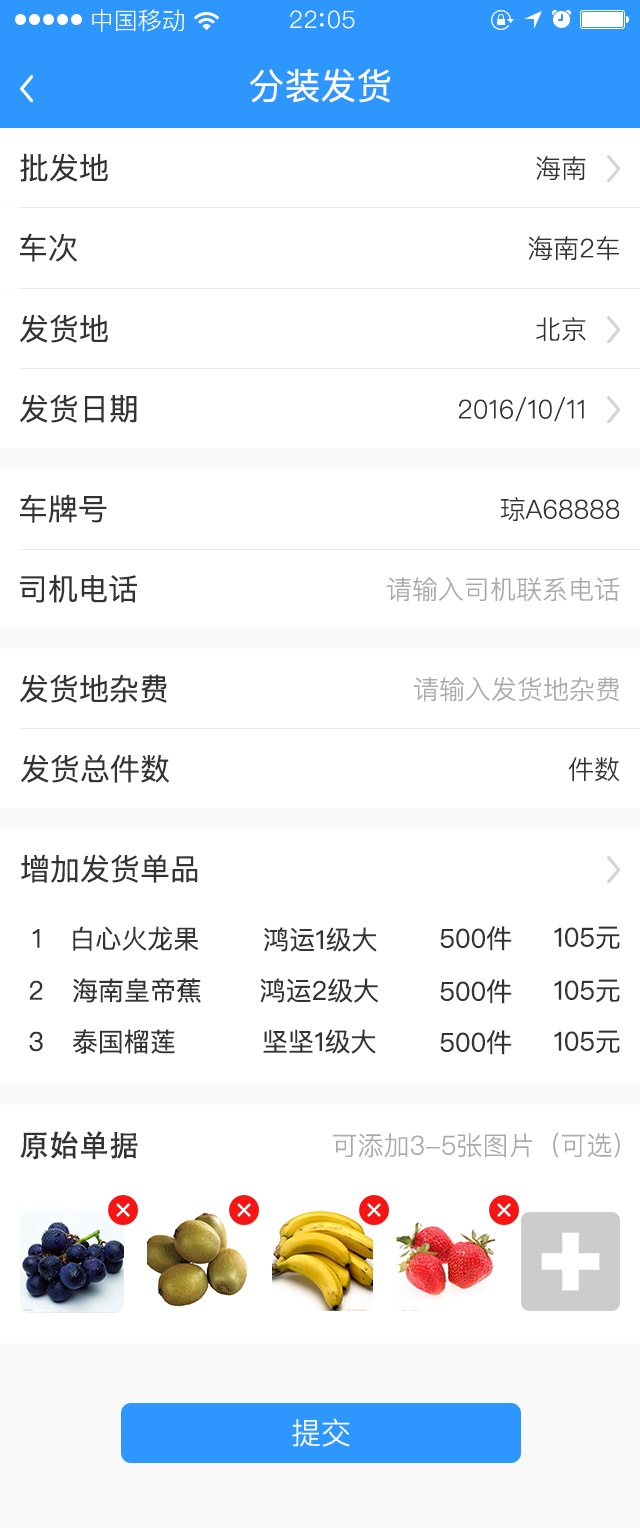
<style>
.page{position:relative;width:640px;height:1528px;background:#ffffff}
.page>*{position:absolute;margin:0}
.t1{font:24px "PingFang-SC-Regular";color:#ffffff}
.t2{font:36px "PingFangSC-Regular";color:#ffffff}
.t3{font:30px "PingFangSC-Regular";color:#333333}
.t4{font:26px "PingFangSC-Light";color:#333333}
.t5{font:26px "PingFangSC-Light";color:#aaaaaa}
.t6{font:26px "PingFangSC-Regular";color:#333333}
.t7{font:30px "AdobeHeitiStd-Regular";color:#333333}
.t8{font:30px "PingFang-SC-Regular";color:#ffffff}
</style>
<div class="page">
<p class="t1" style="left:92px;top:9px;width:92px;height:23px">中国移动</p>
<p class="t2" style="left:250px;top:68px;width:141px;height:35px">分装发货</p>
<p class="t3" style="left:20px;top:153px;width:88px;height:29px">批发地</p>
<p class="t4" style="left:536px;top:156px;width:50px;height:25px">海南</p>
<p class="t3" style="left:20px;top:233px;width:57px;height:29px">车次</p>
<p class="t4" style="left:528px;top:236px;width:91px;height:25px">海南2车</p>
<p class="t3" style="left:20px;top:314px;width:88px;height:29px">发货地</p>
<p class="t4" style="left:536px;top:317px;width:50px;height:24px">北京</p>
<p class="t3" style="left:20px;top:394px;width:117px;height:29px">发货日期</p>
<p class="t4" style="left:458px;top:397px;width:126px;height:25px">2016/10/11</p>
<p class="t3" style="left:20px;top:494px;width:87px;height:29px">车牌号</p>
<p class="t4" style="left:500px;top:497px;width:120px;height:24px">琼A68888</p>
<p class="t3" style="left:20px;top:575px;width:117px;height:28px">司机电话</p>
<p class="t5" style="left:387px;top:577px;width:233px;height:25px">请输入司机联系电话</p>
<p class="t3" style="left:20px;top:674px;width:147px;height:29px">发货地杂费</p>
<p class="t5" style="left:414px;top:677px;width:205px;height:25px">请输入发货地杂费</p>
<p class="t3" style="left:21px;top:754px;width:148px;height:29px">发货总件数</p>
<p class="t4" style="left:568px;top:757px;width:52px;height:25px">件数</p>
<p class="t3" style="left:21px;top:854px;width:177px;height:29px">增加发货单品</p>
<p class="t6" style="left:32px;top:929px;width:8px;height:19px">1</p>
<p class="t6" style="left:73px;top:926px;width:126px;height:25px">白心火龙果</p>
<p class="t6" style="left:264px;top:927px;width:113px;height:25px">鸿运1级大</p>
<p class="t6" style="left:440px;top:926px;width:72px;height:25px">500件</p>
<p class="t6" style="left:554px;top:926px;width:66px;height:24px">105元</p>
<p class="t6" style="left:29px;top:980px;width:14px;height:20px">2</p>
<p class="t6" style="left:73px;top:978px;width:128px;height:25px">海南皇帝蕉</p>
<p class="t6" style="left:260px;top:978px;width:119px;height:25px">鸿运2级大</p>
<p class="t6" style="left:440px;top:979px;width:72px;height:25px">500件</p>
<p class="t6" style="left:554px;top:979px;width:66px;height:24px">105元</p>
<p class="t6" style="left:29px;top:1031px;width:14px;height:21px">3</p>
<p class="t6" style="left:73px;top:1029px;width:102px;height:25px">泰国榴莲</p>
<p class="t6" style="left:263px;top:1029px;width:113px;height:25px">坚坚1级大</p>
<p class="t6" style="left:440px;top:1030px;width:72px;height:25px">500件</p>
<p class="t6" style="left:554px;top:1030px;width:66px;height:24px">105元</p>
<p class="t7" style="left:20px;top:1131px;width:118px;height:29px">原始单据</p>
<p class="t5" style="left:333px;top:1132px;width:287px;height:26px">可添加3-5张图片（可选）</p>
<p class="t8" style="left:292px;top:1418px;width:58px;height:29px">提交</p>
</div>
